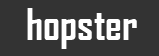
<style>
.page{position:relative;width:159px;height:56px;background:#333333}
.page>*{position:absolute;margin:0}
.t1{font:42.1px "AgencyFB-Bold";color:#ffffff}
</style>
<div class="page">
<p class="t1" style="left:27px;top:8px;width:110px;height:41px">hopster</p>
</div>
